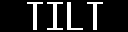
<style>
.page{position:relative;width:128px;height:32px;background:#000000}
.page>*{position:absolute;margin:0}
.t1{font:36px "Terminal";color:#ffffff}
</style>
<div class="page">
<p class="t1" style="left:27px;top:2px;width:76px;height:28px">TILT</p>
</div>
